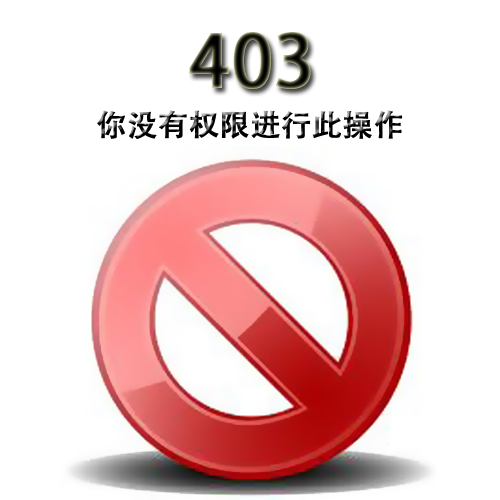
<style>
.page{position:relative;width:500px;height:500px;background:#ffffff}
.page>*{position:absolute;margin:0}
.t1{font:72px "AdobeHeitiStd-Regular";font-weight:bold}
.t2{font:30px "AdobeHeitiStd-Regular";font-weight:bold}
</style>
<div class="page">
<p class="t1" style="left:189px;top:32px;width:122px;height:57px">403</p>
<p class="t2" style="left:97px;top:110px;width:306px;height:29px">你没有权限进行此操作</p>
</div>
